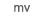
<style>
.page{position:relative;width:32px;height:16px;background:#ffffff}
.page>*{position:absolute;margin:0}
.t1{font:12.5px "ArialMT";color:#616161}
</style>
<div class="page">
<p class="t1" style="left:14px;top:5px;width:17px;height:7px">mv</p>
</div>
